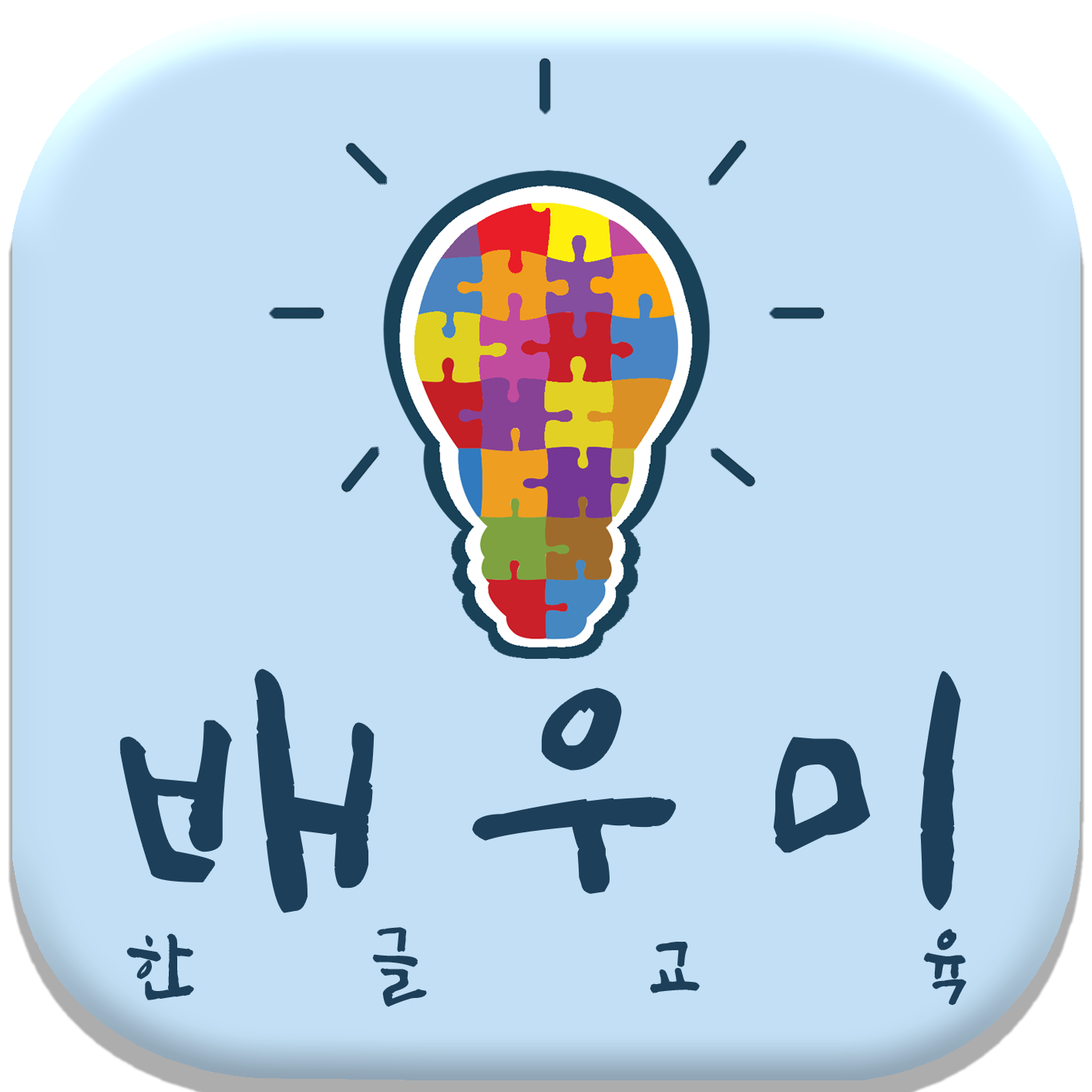
<style>
.page{position:relative;width:1092px;height:1092px;background:#c2dff5}
.page>*{position:absolute;margin:0}
.t1{font:294.1px "SangSangFlowerRoad";color:#1d3f59}
.t2{font:73.7px "SangSangFlowerRoad";color:#1d3f59}
</style>
<div class="page">
<p class="t1" style="left:120px;top:670px;width:840px;height:242px">배 우 미</p>
<p class="t2" style="left:127px;top:928px;width:839px;height:78px">한        글          교          육</p>
</div>
